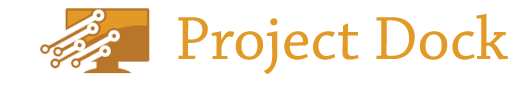
<style>
.page{position:relative;width:525px;height:86px;background:#ffffff}
.page>*{position:absolute;margin:0}
.t1{font:64px "ChaparralPro-Regular";color:#e39925}
</style>
<div class="page">
<p class="t1" style="left:178px;top:14px;width:330px;height:60px">Project Dock</p>
</div>
